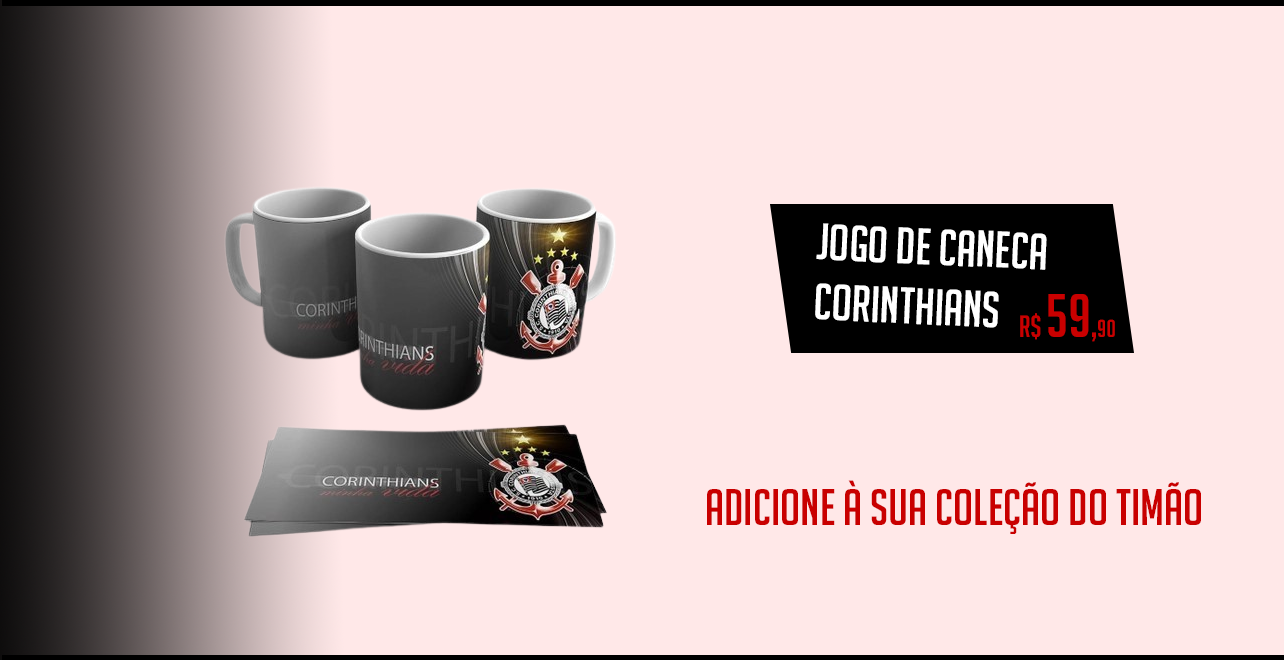
<style>
.page{position:relative;width:1284px;height:660px;background:#ffe8e8}
.page>*{position:absolute;margin:0}
.t1{font:50px "BigNoodleTitling";color:#ffffff}
.t2{font:30px "BigNoodleTitling";color:#c90000}
.t3{font:60px "BigNoodleTitling";color:#c90000}
.t4{font:36px "BigNoodleTitling";color:#c90000}
.t5{font:24px "BigNoodleTitling";color:#c90000}
.t6{font:50px "BigNoodleTitling";color:#c90000}
</style>
<div class="page">
<p class="t1" style="left:815px;top:223px;width:232px;height:105px;rotate:3deg">jogo de caneca<br>corinthians</p>
<p class="t2" style="left:1020px;top:294px;width:95px;height:48px">r$ <span class="t3">59</span><span class="t4">,</span><span class="t5">90</span></p>
<p class="t6" style="left:707px;top:480px;width:494px;height:54px">adicione à sua coleção do timão<br><br>tim</p>
</div>
